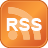
<style>
.page{position:relative;width:48px;height:48px}
.page>*{position:absolute;margin:0}
.t1{font:18px "Arial-BoldMT";color:#fefefe}
</style>
<div class="page">
<p class="t1" style="left:6px;top:18px;width:36px;height:13px">RSS</p>
</div>
